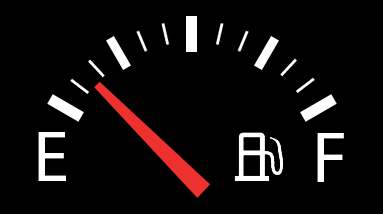
<style>
.page{position:relative;width:383px;height:214px;background:#000000}
.page>*{position:absolute;margin:0}
.t1{font:72px "MyriadPro-Regular";letter-spacing:-0.045em;color:#ffffff}
</style>
<div class="page">
<p class="t1" style="left:38px;top:132px;width:28px;height:49px">E</p>
<p class="t1" style="left:317px;top:133px;width:27px;height:49px">F</p>
</div>
